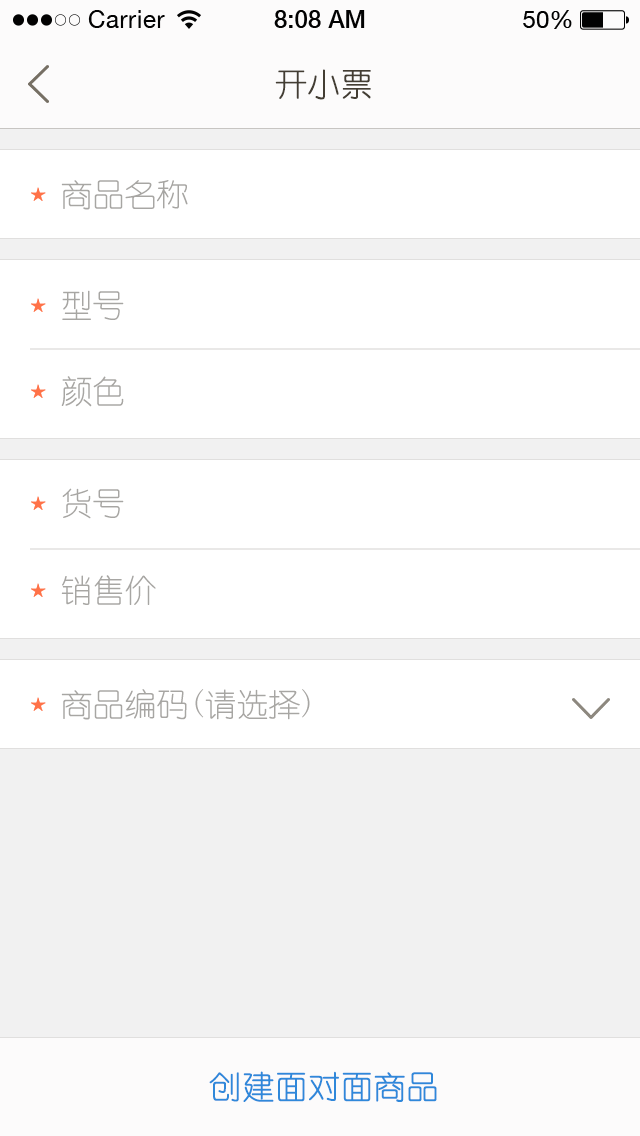
<style>
.page{position:relative;width:640px;height:1136px;background:#ffffff}
.page>*{position:absolute;margin:0}
.t1{font:32px "YouYuan";color:#433d33;text-transform:uppercase;font-weight:bold}
.t2{font:32px "YouYuan";color:#a7a6a3;text-transform:uppercase}
.t3{font:32px "YouYuan";color:#2f88da;text-transform:uppercase;font-weight:bold}
</style>
<div class="page">
<p class="t1" style="left:275px;top:69px;width:96px;height:31px">开小票</p>
<p class="t2" style="left:61px;top:180px;width:127px;height:30px">商品名称</p>
<p class="t2" style="left:62px;top:290px;width:62px;height:30px">型号</p>
<p class="t2" style="left:61px;top:376px;width:63px;height:31px">颜色</p>
<p class="t2" style="left:62px;top:488px;width:62px;height:31px">货号</p>
<p class="t2" style="left:61px;top:575px;width:95px;height:30px">销售价</p>
<p class="t2" style="left:61px;top:689px;width:249px;height:31px">商品编码(请选择)</p>
<p class="t3" style="left:209px;top:1071px;width:228px;height:31px">创建面对面商品</p>
</div>
